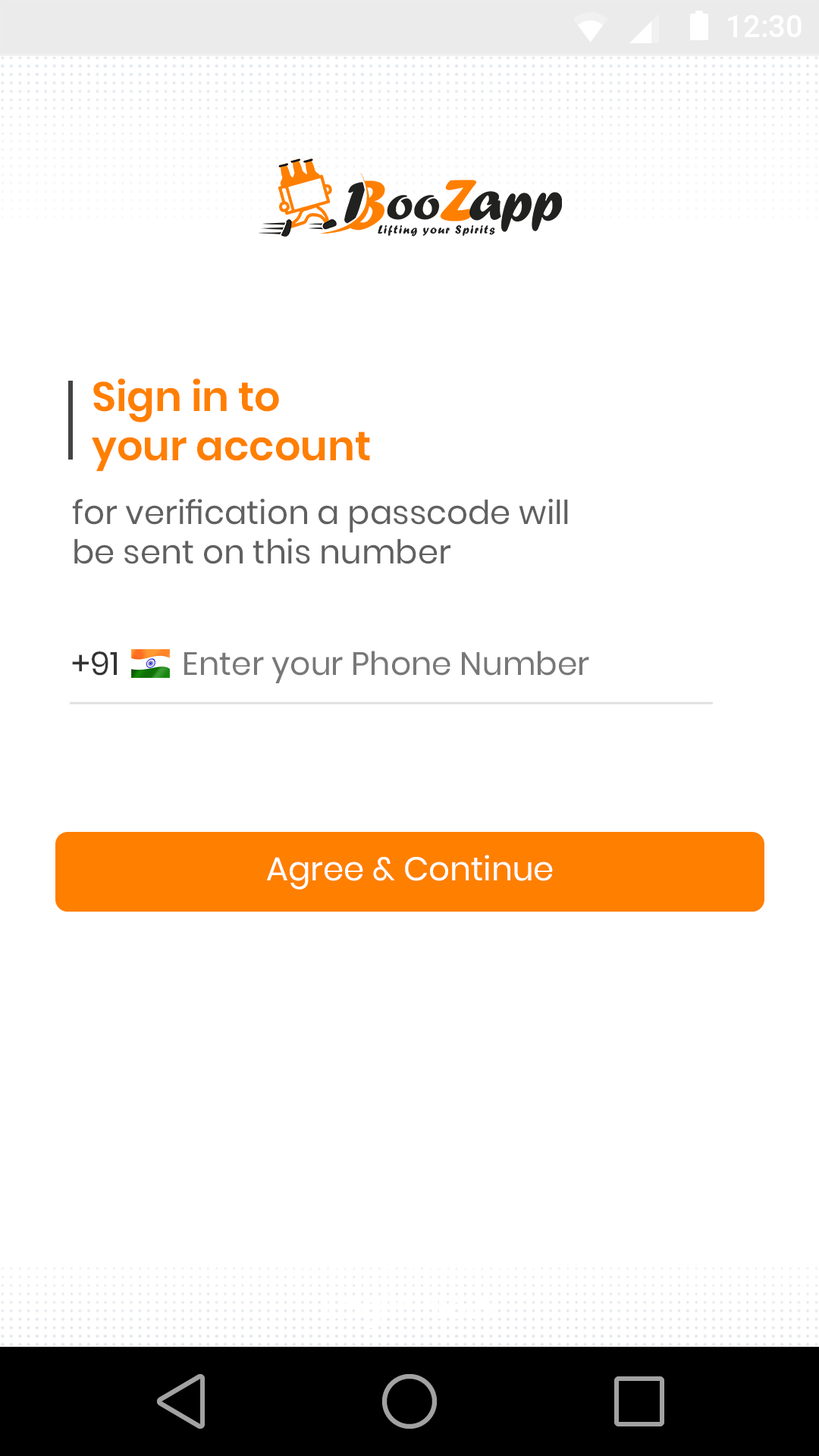
<style>
.page{position:relative;width:819px;height:1456px;background:#ffffff}
.page>*{position:absolute;margin:0}
.t1{font:31.2px "Roboto-Medium";color:#ffffff}
.t2{font:41px "Poppins-SemiBold";color:#ff7f00}
.t3{font:33px "Poppins-Regular";color:#606060}
.t4{font:32.4px "Poppins-Regular";color:#787878}
.t5{font:32.4px "Poppins-Regular";color:#333333}
.t6{font:33.1px "Poppins-Regular";color:#ffffff}
</style>
<div class="page">
<p class="t1" style="left:728px;top:15px;width:74px;height:22px">12:30</p>
<p class="t2" style="left:92px;top:378px;width:278px;height:94px">Sign in to<br>your account</p>
<p class="t3" style="left:72px;top:498px;width:496px;height:66px">for verification a passcode will<br>be sent on this number</p>
<p class="t4" style="left:72px;top:651px;width:517px;height:32px"><span class="t5">+91        </span>Enter your Phone Number</p>
<p class="t6" style="left:267px;top:855px;width:286px;height:35px">Agree &amp; Continue</p>
</div>
